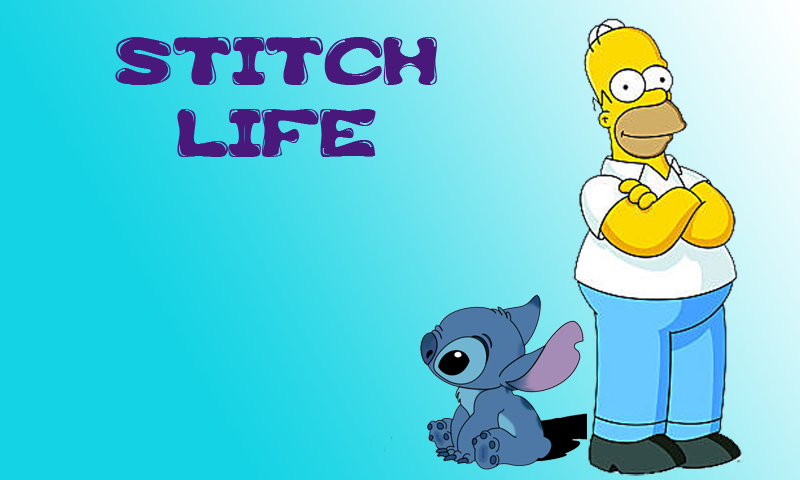
<style>
.page{position:relative;width:800px;height:480px}
.page>*{position:absolute;margin:0}
.t1{font:60px "GFS-Custom-Bubble1";color:#49187b}
</style>
<div class="page">
<p class="t1" style="left:115px;top:37px;width:322px;height:120px;text-align:center">STITCH<br>LIFE</p>
</div>
